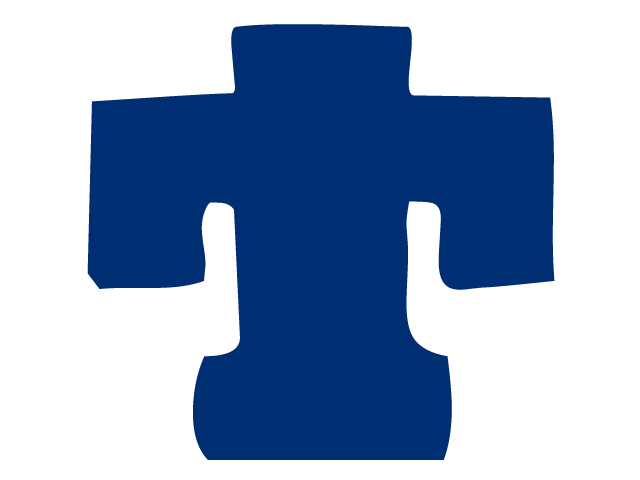
<style>
.page{position:relative;width:640px;height:480px;background:#ffffff}
.page>*{position:absolute;margin:0}
.t1{font:540px "Fatslab";color:#002e73}
</style>
<div class="page">
<p class="t1" style="left:87px;top:24px;width:468px;height:436px">t</p>
</div>
